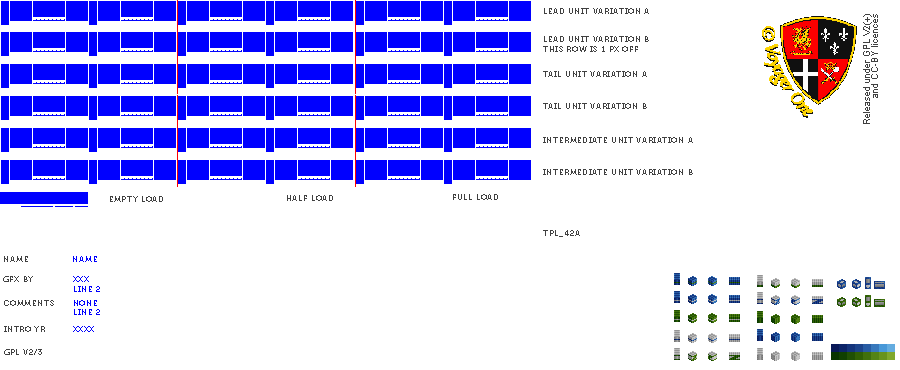
<style>
.page{position:relative;width:900px;height:370px;background:#ffffff}
.page>*{position:absolute;margin:0}
.t1{font:8px "Museo700-Regular";letter-spacing:0.075em;color:#404040;text-transform:uppercase}
.t2{font:8px "Museo700-Regular";letter-spacing:0.075em;color:#0000ff;text-transform:uppercase}
</style>
<div class="page">
<p class="t1" style="left:544px;top:8px;width:105px;height:6px">LEAD UNIT VARIATION A</p>
<p class="t1" style="left:543px;top:36px;width:106px;height:16px">LEAD UNIT VARIATION B<br>this row is 1 px off</p>
<p class="t1" style="left:543px;top:71px;width:104px;height:6px">TAIL UNIT VARIATION A</p>
<p class="t1" style="left:543px;top:103px;width:104px;height:6px">TAIL UNIT VARIATION B</p>
<p class="t1" style="left:543px;top:137px;width:150px;height:6px">INTERMEDIATE UNIT VARIATION A</p>
<p class="t1" style="left:543px;top:169px;width:150px;height:6px">INTERMEDIATE UNIT VARIATION B</p>
<p class="t1" style="left:110px;top:196px;width:53px;height:6px">EMPTY LOAD</p>
<p class="t1" style="left:287px;top:195px;width:46px;height:6px">HALF LOAD</p>
<p class="t1" style="left:453px;top:194px;width:45px;height:6px">FULL LOAD</p>
<p class="t1" style="left:543px;top:230px;width:37px;height:7px">tpl_42a</p>
<p class="t1" style="left:4px;top:256px;width:24px;height:6px">name</p>
<p class="t2" style="left:73px;top:256px;width:24px;height:6px">name</p>
<p class="t1" style="left:3px;top:276px;width:30px;height:6px">gfx by</p>
<p class="t2" style="left:73px;top:276px;width:27px;height:16px">xxx<br>line 2</p>
<p class="t1" style="left:4px;top:300px;width:50px;height:6px">comments</p>
<p class="t2" style="left:74px;top:300px;width:26px;height:15px">none<br>line 2</p>
<p class="t1" style="left:4px;top:326px;width:41px;height:6px">intro yr</p>
<p class="t2" style="left:73px;top:326px;width:21px;height:6px">xxxx</p>
<p class="t1" style="left:4px;top:349px;width:38px;height:6px">gpl v2/3</p>
</div>
